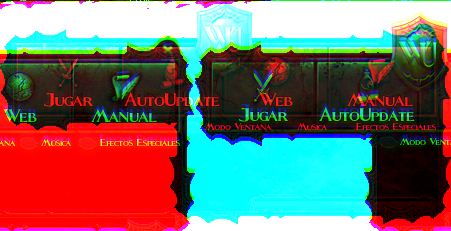
<style>
.page{position:relative;width:451px;height:231px}
.page>*{position:absolute;margin:0}
.t1{font:35px "Fleet-Street";color:#ff1c14}
.t2{font:35px "Fleet-Street"}
.t3{font:19px "Fleet-Street"}
</style>
<div class="page">
<p class="t1" style="left:43px;top:91px;width:50px;height:15px">Jugar</p>
<p class="t2" style="left:124px;top:91px;width:96px;height:14px">AutoUpdate</p>
<p class="t2" style="left:259px;top:92px;width:34px;height:13px">Web</p>
<p class="t2" style="left:347px;top:92px;width:66px;height:14px">Manual</p>
<p class="t3" style="left:205px;top:122px;width:67px;height:8px">Modo Ventana</p>
<p class="t3" style="left:297px;top:122px;width:30px;height:7px">Música</p>
<p class="t3" style="left:356px;top:122px;width:80px;height:7px">Efectos Especiales</p>
</div>
